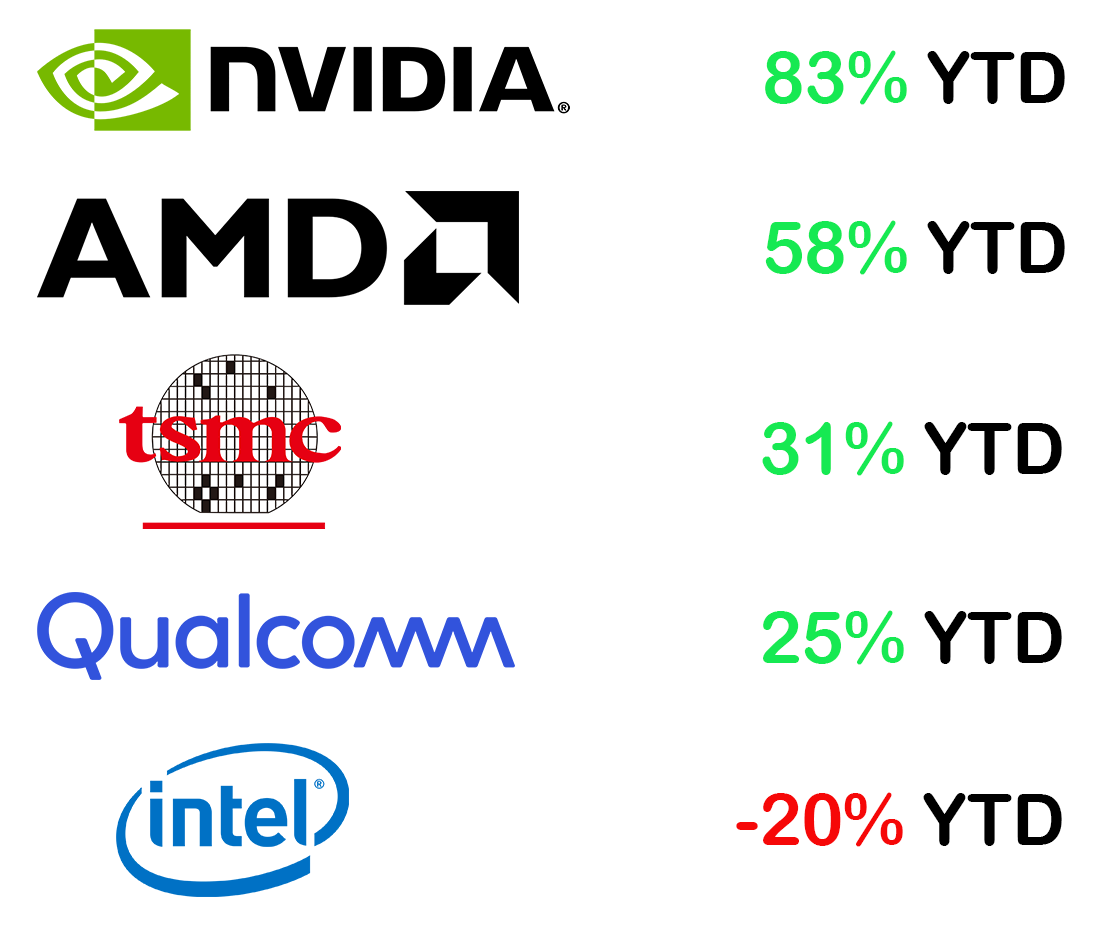
<style>
.page{position:relative;width:1110px;height:926px;background:#ffffff}
.page>*{position:absolute;margin:0}
.t1{font:72px "ArialRoundedMTBold";letter-spacing:-0.005em;color:#16e952}
.t2{font:72px "ArialRoundedMTBold";letter-spacing:-0.005em;color:#000000}
.t3{font:72px "ArialRoundedMTBold";letter-spacing:-0.005em;color:#f60808}
</style>
<div class="page">
<p class="t1" style="left:765px;top:50px;width:300px;height:55px">83%<span class="t2"> YTD</span></p>
<p class="t1" style="left:765px;top:220px;width:300px;height:55px">58%<span class="t2"> YTD</span></p>
<p class="t1" style="left:762px;top:421px;width:300px;height:55px">31%<span class="t2"> YTD</span></p>
<p class="t1" style="left:763px;top:610px;width:299px;height:55px">25%<span class="t2"> YTD</span></p>
<p class="t3" style="left:736px;top:792px;width:326px;height:55px">-20%<span class="t2"> YTD</span></p>
</div>
